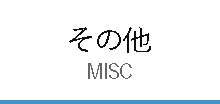
<style>
.page{position:relative;width:220px;height:104px;background:#ffffff}
.page>*{position:absolute;margin:0}
.t1{font:30px "YuGo-Medium";letter-spacing:-0.075em;color:#111111}
.t2{font:20px "YuGo-Medium";letter-spacing:-0.05em;color:#666666}
</style>
<div class="page">
<p class="t1" style="left:69px;top:27px;width:82px;height:26px">その他</p>
<p class="t2" style="left:88px;top:63px;width:44px;height:16px">MISC</p>
</div>
